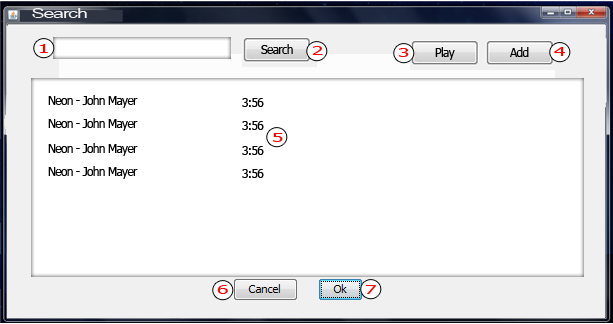
<style>
.page{position:relative;width:613px;height:324px;background:#ffffff}
.page>*{position:absolute;margin:0}
.t1{font:14.4px "ArialNarrow";letter-spacing:-0.05em;color:#f0f0f0;scale:1.67 1}
.t2{font:12.7px "Tahoma";letter-spacing:-0.05em;color:#ff0000;scale:1.67 1}
.t3{font:12.7px "Tahoma";letter-spacing:-0.05em;color:#000000;scale:0.93 1}
</style>
<div class="page">
<p class="t1" style="left:32px;top:8px;width:55px;height:10px">Search</p>
<p class="t2" style="left:40px;top:44px;width:8px;height:9px">1</p>
<p class="t3" style="left:261px;top:44px;width:32px;height:10px">Search</p>
<p class="t2" style="left:313px;top:46px;width:10px;height:9px">2</p>
<p class="t2" style="left:398px;top:48px;width:11px;height:9px">3</p>
<p class="t3" style="left:435px;top:47px;width:20px;height:13px">Play</p>
<p class="t3" style="left:510px;top:47px;width:19px;height:10px">Add</p>
<p class="t2" style="left:554px;top:47px;width:12px;height:9px">4</p>
<p class="t3" style="left:48px;top:95px;width:90px;height:13px">Neon - John Mayer</p>
<p class="t3" style="left:242px;top:98px;width:22px;height:9px">3:56</p>
<p class="t3" style="left:48px;top:118px;width:90px;height:13px">Neon - John Mayer</p>
<p class="t3" style="left:242px;top:121px;width:22px;height:9px">3:56</p>
<p class="t2" style="left:273px;top:133px;width:10px;height:9px">5</p>
<p class="t3" style="left:48px;top:143px;width:90px;height:13px">Neon - John Mayer</p>
<p class="t3" style="left:242px;top:146px;width:22px;height:9px">3:56</p>
<p class="t3" style="left:48px;top:166px;width:90px;height:13px">Neon - John Mayer</p>
<p class="t3" style="left:242px;top:169px;width:22px;height:9px">3:56</p>
<p class="t2" style="left:217px;top:285px;width:11px;height:9px">6</p>
<p class="t2" style="left:365px;top:285px;width:11px;height:9px">7</p>
</div>
